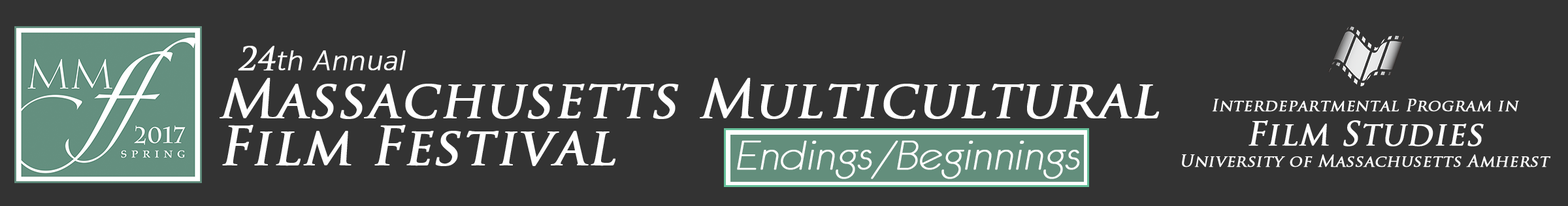
<style>
.page{position:relative;width:1568px;height:206px;background:#333333}
.page>*{position:absolute;margin:0}
.t1{font:29.4px "SukhumvitSet-Thin";color:#ffffff;font-weight:bold;font-style:italic}
.t2{font:31.4px "TrajanPro-Regular";color:#ffffff;font-weight:bold;font-style:italic}
.t3{font:52.3px/47px "TrajanPro-Regular";color:#ffffff;font-weight:bold;font-style:italic}
.t4{font:16.3px/26.1px "TrajanPro-Regular";color:#ffffff;font-weight:bold;font-style:italic}
.t5{font:16.3px/19.6px "TrajanPro-Regular";color:#ffffff;font-weight:bold;font-style:italic}
.t6{font:32.7px/35.9px "TrajanPro-Regular";color:#ffffff;font-weight:bold;font-style:italic}
.t7{font:47px "Brazilia";color:#ffffff;font-weight:bold;font-style:italic}
</style>
<div class="page">
<p class="t1" style="left:238px;top:46px;width:168px;height:25px"><span class="t2">24</span>th Annual</p>
<p class="t3" style="left:220px;top:78px;width:939px;height:88px">Massachusetts Multicultural<br>Film Festival</p>
<p class="t4" style="left:1182px;top:99px;width:369px;height:68px;text-align:center"><span class="t5">Interdepartmental Program in<br></span><span class="t6">Film Studies<br></span>University of Massachusetts Amherst</p>
<p class="t7" style="left:737px;top:140px;width:343px;height:39px">Endings/Beginnings</p>
</div>
